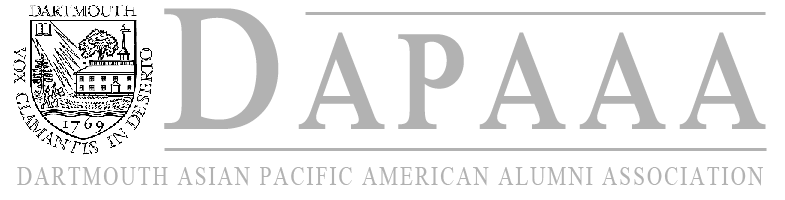
<style>
.page{position:relative;width:785px;height:200px;background:#ffffff}
.page>*{position:absolute;margin:0}
.t1{font:143px "IskoolaPota-Bold";letter-spacing:0.1em;color:#b2b2b2;scale:0.77 1}
.t2{font:182px "IskoolaPota-Bold";letter-spacing:0.1em;color:#b2b2b2;scale:0.77 1}
.t3{font:27.3px "IskoolaPota";letter-spacing:0.1em;color:#b2b2b2;scale:0.77 1}
</style>
<div class="page">
<p class="t1" style="left:164px;top:8px;width:602px;height:121px"><span class="t2">D</span>APAAA</p>
<p class="t3" style="left:17px;top:167px;width:746px;height:19px">DARTMOUTH ASIAN PACIFIC AMERICAN ALUMNI ASSOCIATION</p>
</div>
